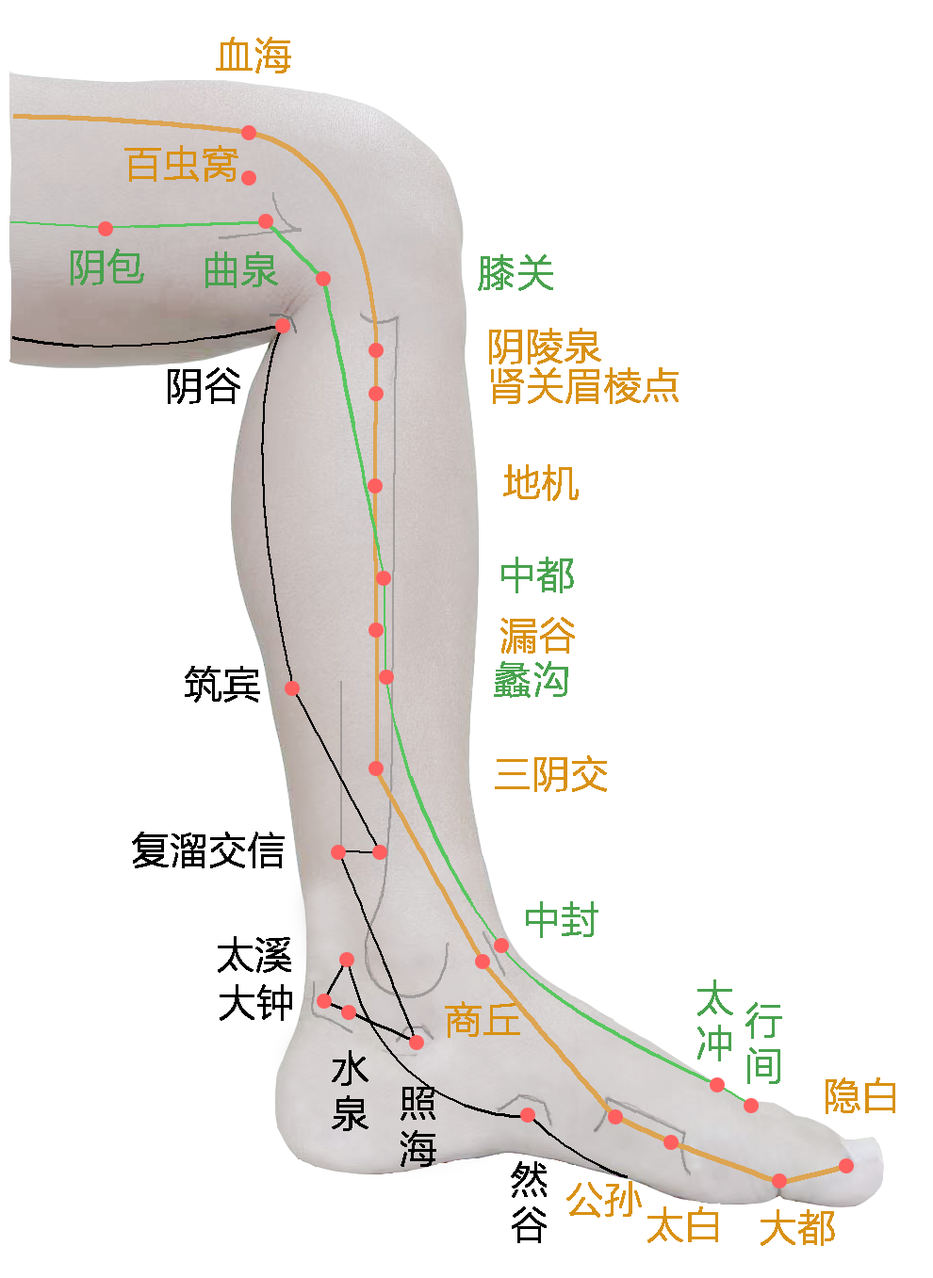
<style>
.page{position:relative;width:933px;height:1278px;background:#ffffff}
.page>*{position:absolute;margin:0}
.t1{font:37.7px "MicrosoftYaHeiLight";color:#d99114;font-weight:bold}
.t2{font:37.7px "MicrosoftYaHeiLight";color:#48a24e;font-weight:bold}
.t3{font:37.7px "MicrosoftYaHeiLight";color:#000000;font-weight:bold}
</style>
<div class="page">
<p class="t1" style="left:216px;top:37px;width:75px;height:36px">血海</p>
<p class="t1" style="left:124px;top:145px;width:114px;height:37px">百虫窝</p>
<p class="t2" style="left:71px;top:249px;width:73px;height:36px">阴包</p>
<p class="t2" style="left:205px;top:252px;width:73px;height:36px">曲泉</p>
<p class="t2" style="left:478px;top:254px;width:75px;height:37px">膝关</p>
<p class="t1" style="left:489px;top:328px;width:112px;height:37px">阴陵泉</p>
<p class="t3" style="left:168px;top:367px;width:72px;height:37px">阴谷</p>
<p class="t1" style="left:491px;top:367px;width:187px;height:37px">肾关眉棱点</p>
<p class="t1" style="left:503px;top:464px;width:75px;height:37px">地机</p>
<p class="t2" style="left:501px;top:557px;width:73px;height:37px">中都</p>
<p class="t1" style="left:500px;top:617px;width:75px;height:37px">漏谷</p>
<p class="t2" style="left:494px;top:661px;width:74px;height:37px">蠡沟</p>
<p class="t3" style="left:185px;top:666px;width:75px;height:37px">筑宾</p>
<p class="t1" style="left:495px;top:756px;width:112px;height:36px">三阴交</p>
<p class="t3" style="left:132px;top:832px;width:153px;height:37px">复溜交信</p>
<p class="t2" style="left:526px;top:902px;width:72px;height:36px">中封</p>
<p class="t3" style="left:218px;top:936px;width:73px;height:37px">太溪</p>
<p class="t3" style="left:220px;top:985px;width:72px;height:36px">大钟</p>
<p class="t2" style="left:697px;top:980px;width:36px;height:82px">太<br>冲</p>
<p class="t1" style="left:445px;top:1001px;width:75px;height:37px">商丘</p>
<p class="t2" style="left:745px;top:1002px;width:37px;height:82px">行<br>间</p>
<p class="t3" style="left:332px;top:1050px;width:36px;height:81px">水<br>泉</p>
<p class="t1" style="left:825px;top:1078px;width:70px;height:37px">隐白</p>
<p class="t3" style="left:400px;top:1087px;width:36px;height:80px">照<br>海</p>
<p class="t3" style="left:511px;top:1162px;width:35px;height:82px">然<br>谷</p>
<p class="t1" style="left:566px;top:1181px;width:76px;height:37px">公孙</p>
<p class="t1" style="left:647px;top:1207px;width:71px;height:37px">太白</p>
<p class="t1" style="left:760px;top:1210px;width:75px;height:36px">大都</p>
</div>
